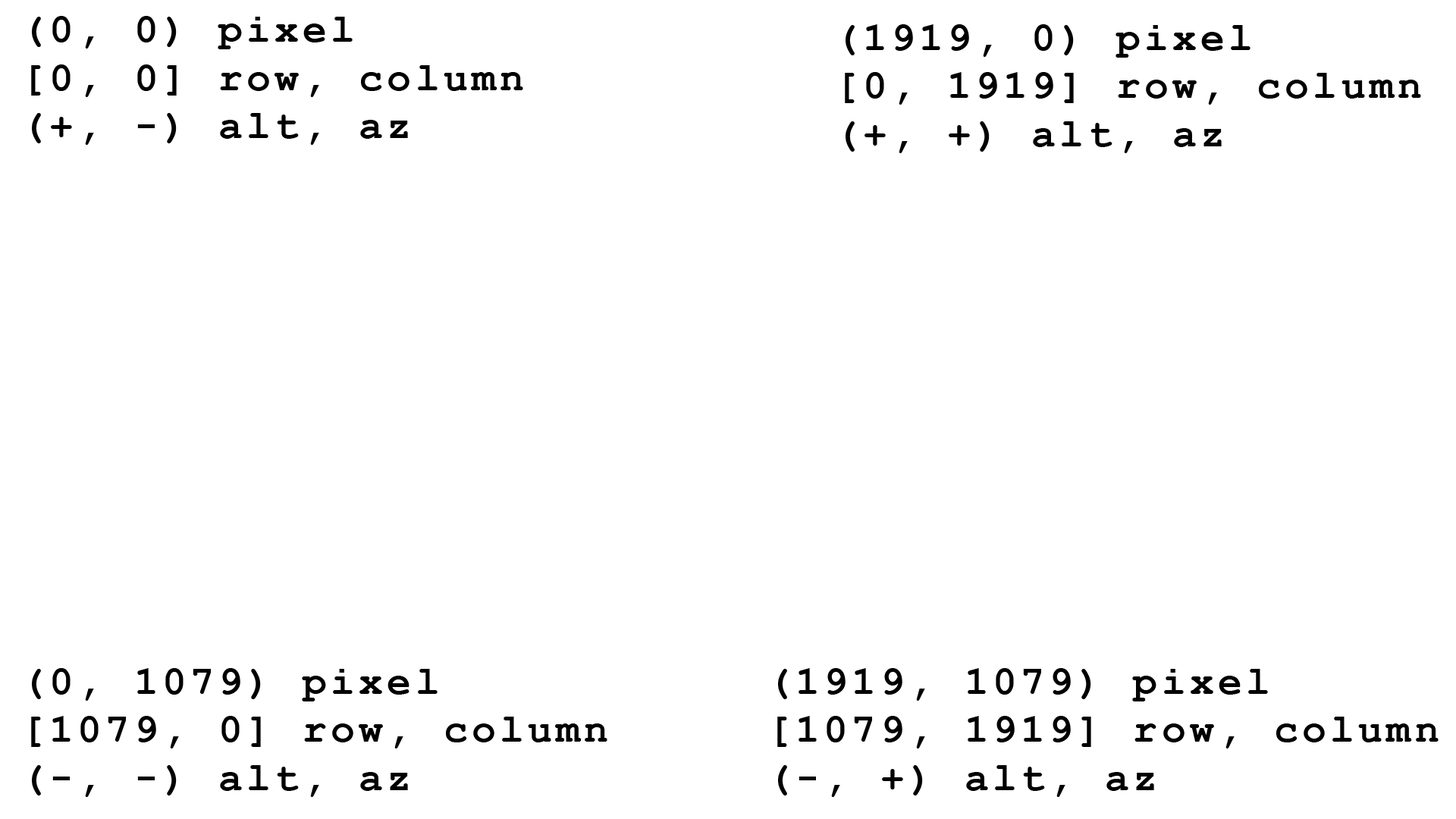
<style>
.page{position:relative;width:1456px;height:819px;background:#ffffff}
.page>*{position:absolute;margin:0}
.t1{font:40.2px "CourierNewPS-BoldMT";letter-spacing:0.1em;color:#000000}
</style>
<div class="page">
<p class="t1" style="left:31px;top:16px;width:492px;height:129px">(0, 0) pixel<br>[0, 0] row, column<br>(+, -) alt, az</p>
<p class="t1" style="left:845px;top:24px;width:576px;height:129px">(1919, 0) pixel<br>[0, 1919] row, column<br>(+, +) alt, az</p>
<p class="t1" style="left:31px;top:668px;width:576px;height:129px">(0, 1079) pixel<br>[1079, 0] row, column<br>(-, -) alt, az</p>
<p class="t1" style="left:777px;top:668px;width:662px;height:129px">(1919, 1079) pixel<br>[1079, 1919] row, column<br>(-, +) alt, az</p>
</div>
